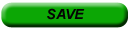
<style>
.page{position:relative;width:130px;height:30px;background:#0ca705}
.page>*{position:absolute;margin:0}
.t1{font:14px "Arial-BoldItalicMT";color:#040404}
</style>
<div class="page">
<p class="t1" style="left:47px;top:8px;width:38px;height:12px">SAVE</p>
</div>
